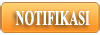
<style>
.page{position:relative;width:100px;height:35px}
.page>*{position:absolute;margin:0}
.t1{font:20.8px "TimesNewRomanPS-BoldMT";color:#fefdfd;scale:0.6 1}
</style>
<div class="page">
<p class="t1" style="left:15px;top:10px;width:75px;height:16px">NOTIFIKASI</p>
</div>
